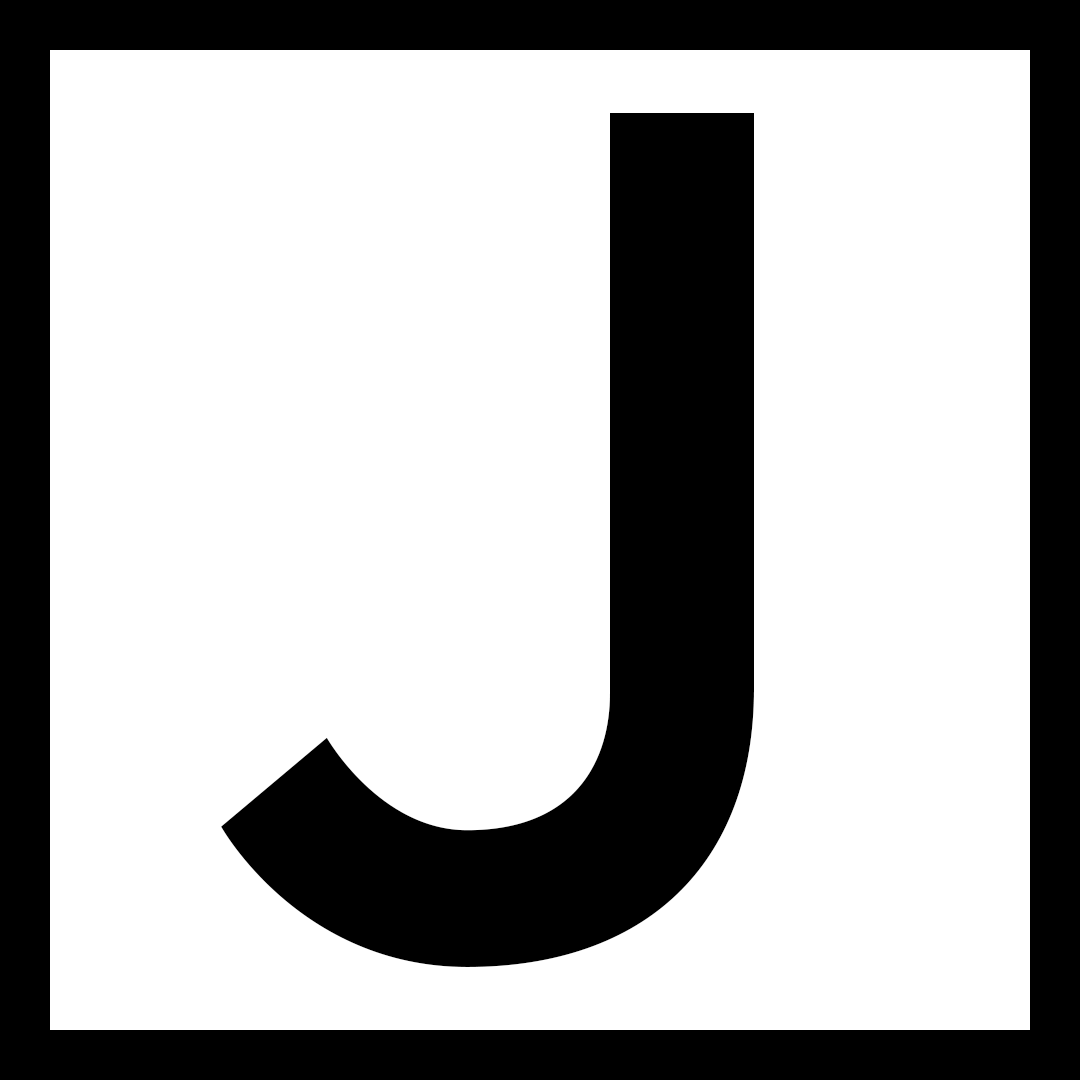
<style>
.page{position:relative;width:1080px;height:1080px;background:#ffffff}
.page>*{position:absolute;margin:0}
.t1{font:1200px "Europa-Bold";color:#000000}
</style>
<div class="page">
<p class="t1" style="left:221px;top:113px;width:533px;height:854px">J</p>
</div>
